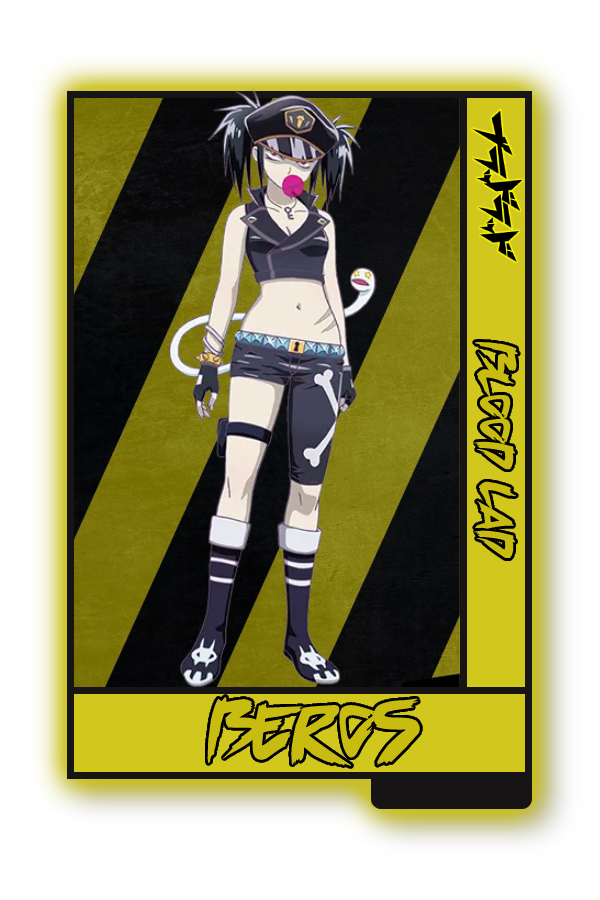
<style>
.page{position:relative;width:600px;height:900px;background:#ffffff}
.page>*{position:absolute;margin:0}
.t1{font:48.8px "ChillingSabrina";color:#c8bc10}
.t2{font:75px "ChillingSabrina";color:#c8bc10}
</style>
<div class="page">
<p class="t1" style="left:473px;top:341px;width:45px;height:218px;rotate:90deg">Blood Lad</p>
<p class="t2" style="left:207px;top:696px;width:213px;height:71px">BEROS</p>
</div>
